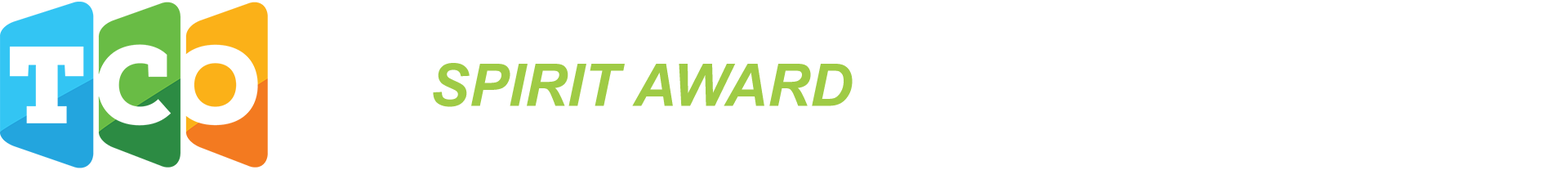
<style>
.page{position:relative;width:1568px;height:170px;background:#ffffff}
.page>*{position:absolute;margin:0}
.t1{font:58.8px "Arial-BoldItalicMT";color:#9fcb45}
</style>
<div class="page">
<p class="t1" style="left:433px;top:63px;width:420px;height:44px">SPIRIT AWARD</p>
</div>
